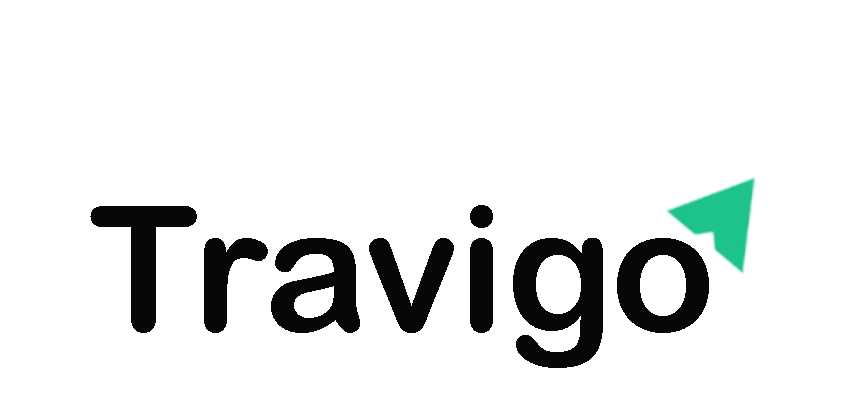
<style>
.page{position:relative;width:847px;height:400px;background:#ffffff}
.page>*{position:absolute;margin:0}
.t1{font:174.7px "ArialRoundedMTBold";color:#070707}
</style>
<div class="page">
<p class="t1" style="left:90px;top:205px;width:619px;height:163px">Travigo</p>
</div>
